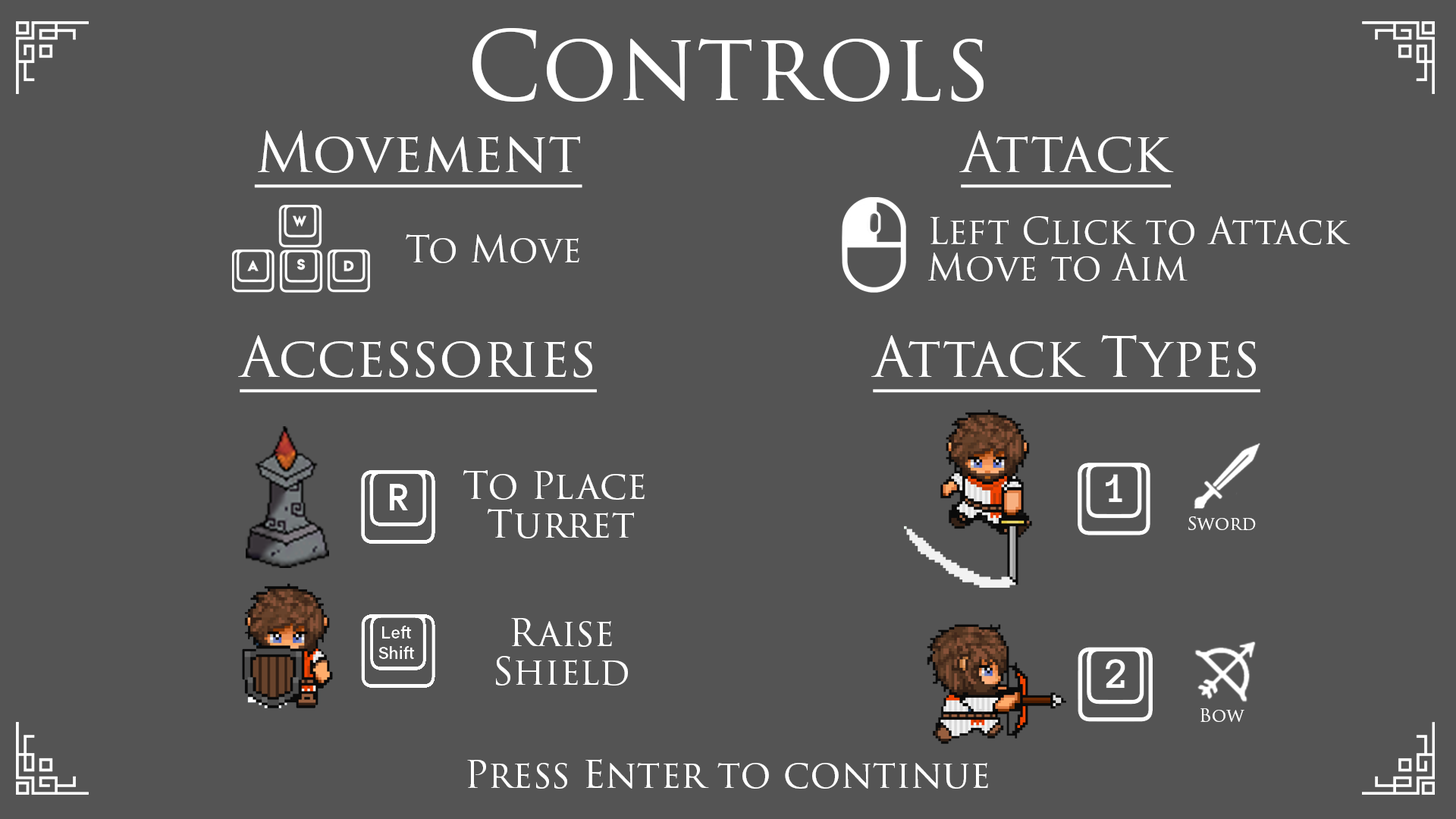
<style>
.page{position:relative;width:1456px;height:819px;background:#545454}
.page>*{position:absolute;margin:0}
.t1{font:94px "TrajanPro3-Regular";color:#ffffff}
.t2{font:54.6px "TrajanPro3-Regular";color:#ffffff;text-decoration:underline}
.t3{font:36.4px/36.4px "TrajanPro3-Regular";color:#ffffff}
.t4{font:36.4px "TrajanPro3-Regular";color:#ffffff}
.t5{font:37.9px/38.7px "TrajanPro3-Regular";color:#ffffff}
.t6{font:18.2px "TrajanPro3-Regular";color:#ffffff}
.t7{font:37.9px "TrajanPro3-Regular";color:#ffffff}
</style>
<div class="page">
<p class="t1" style="left:472px;top:28px;width:512px;height:74px">Controls</p>
<p class="t2" style="left:254px;top:130px;width:328px;height:58px">Movement</p>
<p class="t2" style="left:959px;top:130px;width:215px;height:58px">Attack</p>
<p class="t3" style="left:928px;top:216px;width:423px;height:65px">Left Click to Attack<br>Move to Aim</p>
<p class="t4" style="left:406px;top:234px;width:173px;height:29px">To Move</p>
<p class="t2" style="left:238px;top:335px;width:359px;height:58px">Accessories</p>
<p class="t2" style="left:871px;top:335px;width:389px;height:58px">Attack Types</p>
<p class="t5" style="left:463px;top:470px;width:182px;height:68px;text-align:center">To Place <br>Turret</p>
<p class="t6" style="left:1188px;top:516px;width:68px;height:15px">Sword</p>
<p class="t5" style="left:496px;top:618px;width:132px;height:68px;text-align:center">Raise<br>Shield</p>
<p class="t6" style="left:1200px;top:708px;width:44px;height:14px">Bow</p>
<p class="t7" style="left:467px;top:759px;width:521px;height:30px">Press Enter to continue</p>
</div>
